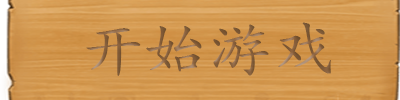
<style>
.page{position:relative;width:400px;height:100px}
.page>*{position:absolute;margin:0}
.t1{font:60px "STKaiti";color:#835c47;scale:1.07 1}
</style>
<div class="page">
<p class="t1" style="left:86px;top:22px;width:245px;height:54px;opacity:0.71">开始游戏</p>
</div>
